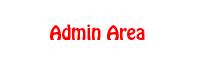
<style>
.page{position:relative;width:200px;height:65px;background:#ffffff}
.page>*{position:absolute;margin:0}
.t1{font:18px "HoboStd";color:#ff0000}
</style>
<div class="page">
<p class="t1" style="left:50px;top:24px;width:95px;height:16px">Admin Area</p>
</div>
